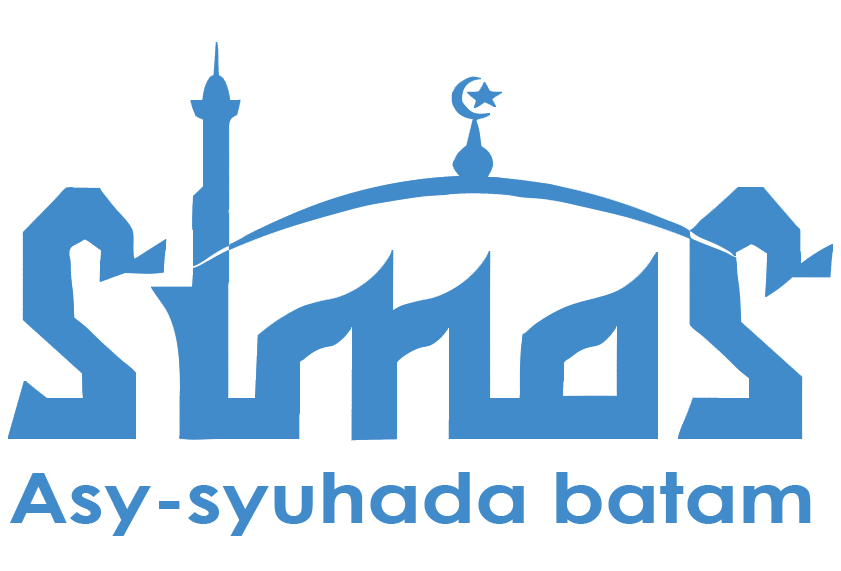
<style>
.page{position:relative;width:841px;height:571px;background:#ffffff}
.page>*{position:absolute;margin:0}
.t1{font:68.6px "CenturyGothic-Bold";color:#428bca;scale:1.19 1}
</style>
<div class="page">
<p class="t1" style="left:10px;top:472px;width:801px;height:64px">Asy-syuhada batam</p>
</div>
